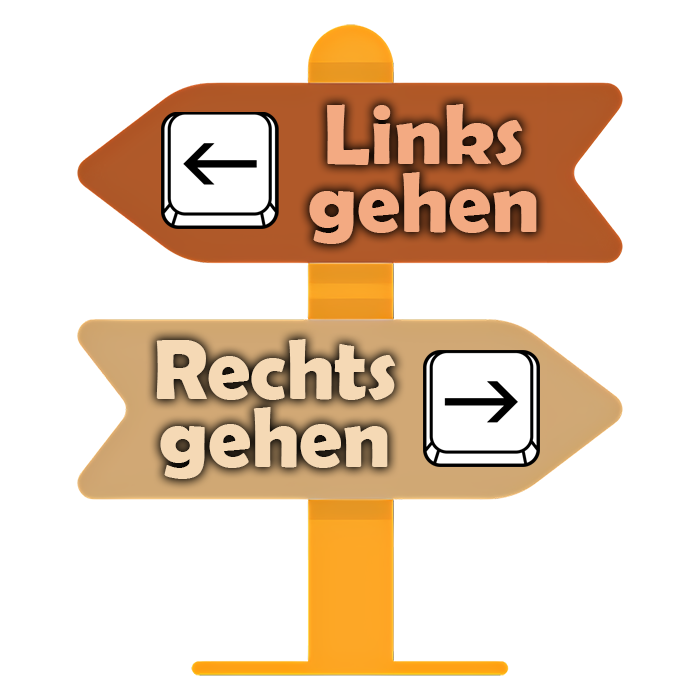
<style>
.page{position:relative;width:700px;height:700px;background:#ffffff}
.page>*{position:absolute;margin:0}
.t1{font:85.7px/68.6px "BerlinSansFBDemi-Bold";color:#f3aa82}
.t2{font:85.7px/68.6px "BerlinSansFBDemi-Bold";color:#f5d9b5}
</style>
<div class="page">
<p class="t1" style="left:309px;top:104px;width:228px;height:140px;text-align:center">Links<br>gehen</p>
<p class="t2" style="left:156px;top:339px;width:240px;height:140px;text-align:center">Rechts<br>gehen</p>
</div>
